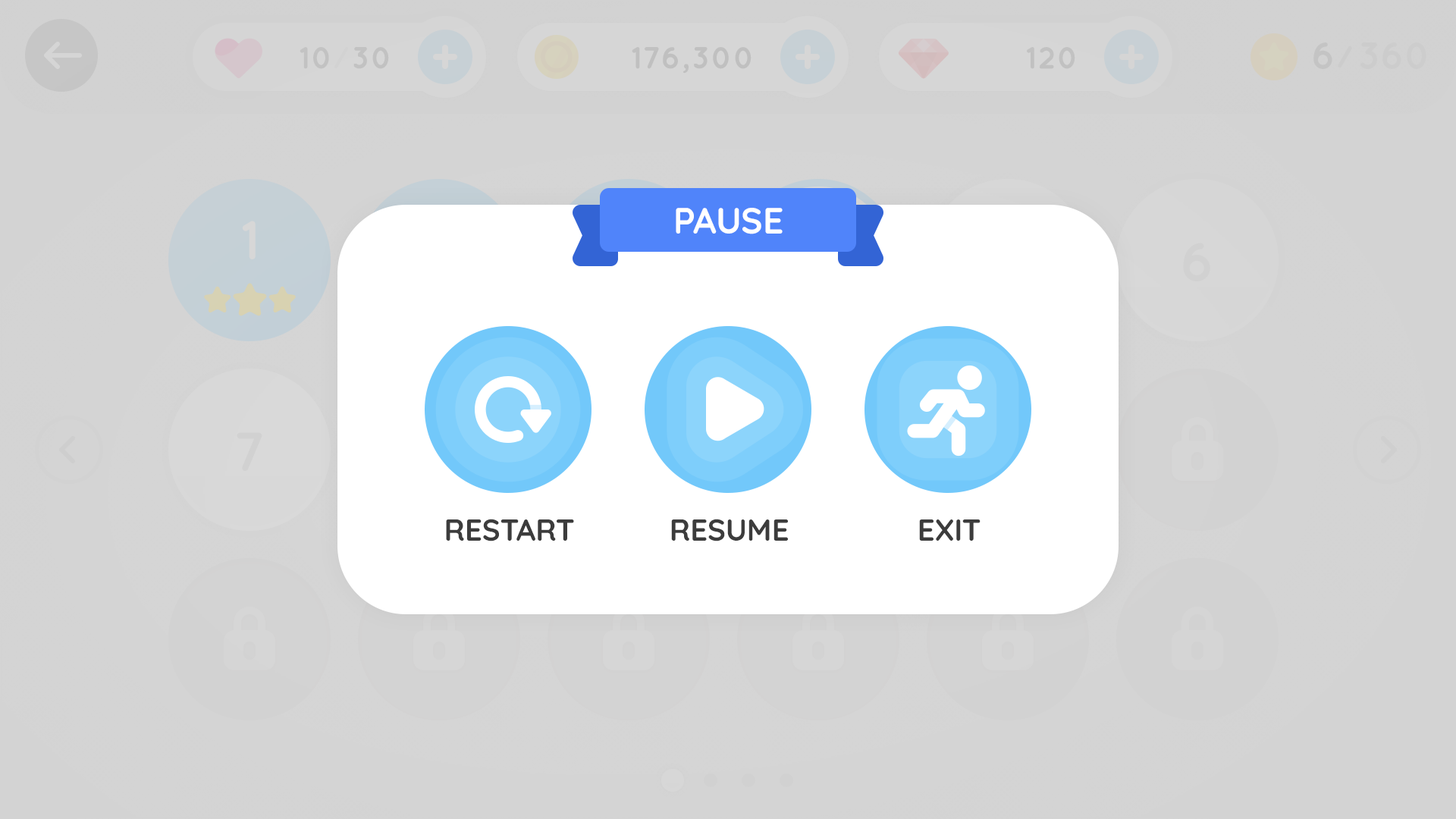
<style>
.page{position:relative;width:1456px;height:819px;background:#d4d4d4}
.page>*{position:absolute;margin:0}
.t1{font:36.4px "Quicksand-Bold";color:#ffffff;text-transform:uppercase}
.t2{font:30.3px "Quicksand-Bold";color:#3c3c3c;text-transform:uppercase}
</style>
<div class="page">
<p class="t1" style="left:676px;top:208px;width:107px;height:26px">Pause</p>
<p class="t2" style="left:446px;top:519px;width:128px;height:22px">restart</p>
<p class="t2" style="left:671px;top:519px;width:117px;height:22px">Resume</p>
<p class="t2" style="left:919px;top:519px;width:62px;height:22px">exit</p>
</div>
